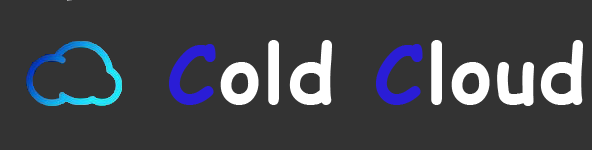
<style>
.page{position:relative;width:592px;height:150px;background:#333333}
.page>*{position:absolute;margin:0}
.t1{font:80px "ComicSansMS-Bold";letter-spacing:0.03em;color:#ffffff}
.t2{font:80px "ComicSansMS-Bold";letter-spacing:0.03em;color:#2a1dd6}
</style>
<div class="page">
<p class="t1" style="left:169px;top:40px;width:414px;height:66px"><span class="t2">C</span>old <span class="t2">C</span>loud</p>
</div>
